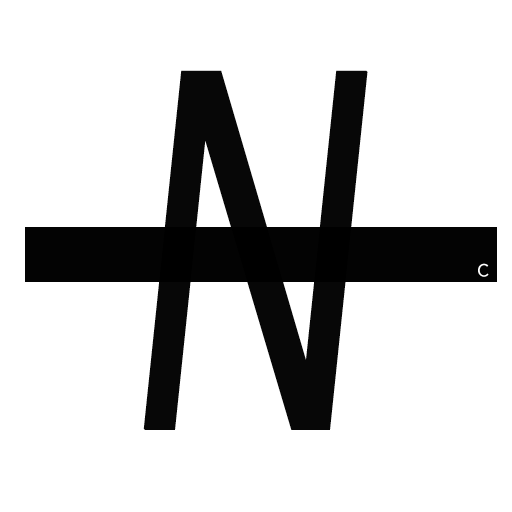
<style>
.page{position:relative;width:512px;height:512px;background:#ffffff}
.page>*{position:absolute;margin:0}
.t1{font:504px "Avenir-Medium";letter-spacing:0.025em;color:#000000;font-weight:bold;font-style:italic;scale:0.59 1}
.t2{font:17.6px "Avenir-Medium";color:#ffffff;scale:0.94 1}
</style>
<div class="page">
<p class="t1" style="left:143px;top:70px;width:225px;height:360px">N</p>
<p class="t2" style="left:478px;top:263px;width:11px;height:14px">C</p>
</div>
